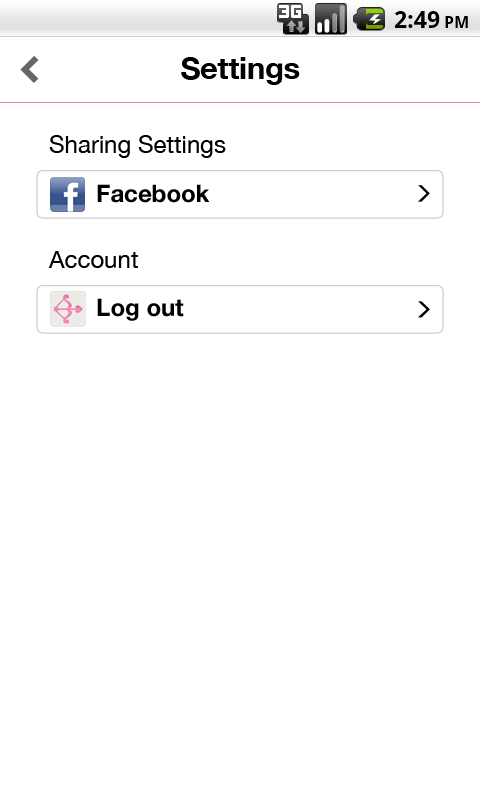
<style>
.page{position:relative;width:480px;height:800px;background:#ffffff}
.page>*{position:absolute;margin:0}
.t1{font:30px "HelveticaNeue-Bold";color:#000000}
.t2{font:24px "HelveticaNeue";color:#000000}
.t3{font:24px "HelveticaNeue-Bold";color:#000000}
</style>
<div class="page">
<p class="t1" style="left:181px;top:57px;width:119px;height:28px">Settings</p>
<p class="t2" style="left:49px;top:135px;width:177px;height:23px">Sharing Settings</p>
<p class="t3" style="left:97px;top:184px;width:113px;height:19px">Facebook</p>
<p class="t2" style="left:48px;top:251px;width:90px;height:17px">Account</p>
<p class="t3" style="left:97px;top:298px;width:87px;height:23px">Log out</p>
</div>
